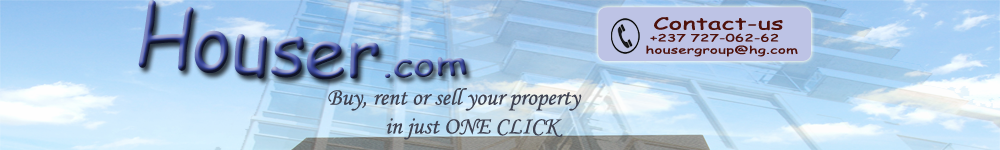
<style>
.page{position:relative;width:1000px;height:150px}
.page>*{position:absolute;margin:0}
.t1{font:72px "ComicSansMS"}
.t2{font:40px "ComicSansMS"}
.t3{font:10px "ComicSansMS";color:#4e120c;scale:1.55 1}
.t4{font:16.7px "ComicSansMS";color:#727caf;scale:1.55 1}
.t5{font:16.7px "ComicSansMS";color:#4e120c;scale:1.55 1}
.t6{font:24px "MonotypeCorsiva";color:#404352}
</style>
<div class="page">
<p class="t1" style="left:138px;top:0px;width:329px;height:80px;rotate:3deg">Houser<span class="t2">.com</span></p>
<p class="t3" style="left:646px;top:17px;width:152px;height:40px"><span class="t4">    </span><span class="t5">Contact-us<br></span>      +237 727-062-62<br>     housergroup@hg.com</p>
<p class="t6" style="left:328px;top:88px;width:254px;height:52px">Buy, rent or sell your property<br>           in just ONE CLICK</p>
</div>
